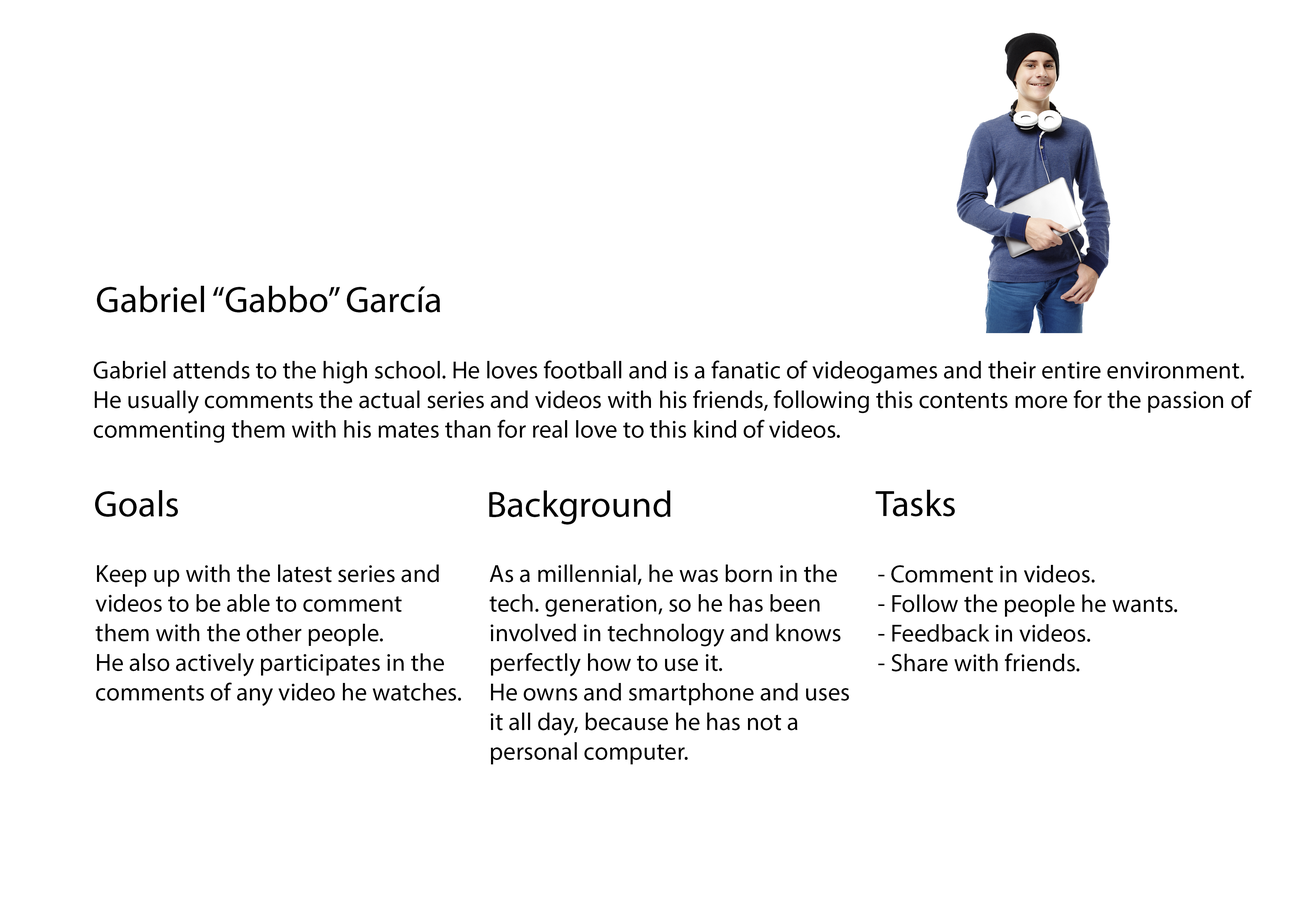
<style>
.page{position:relative;width:1299px;height:918px;background:#ffffff}
.page>*{position:absolute;margin:0}
.t1{font:37px "MyriadPro-Regular";color:#000000}
.t2{font:24.7px "MyriadPro-Regular";color:#000000}
</style>
<div class="page">
<p class="t1" style="left:97px;top:286px;width:343px;height:26px">Gabriel “Gabbo” García</p>
<p class="t2" style="left:94px;top:361px;width:1158px;height:82px">Gabriel attends to the high school. He loves football and is a fanatic of videogames and their entire environment.<br>He usually comments the actual series and videos with his friends, following this contents more for the passion of<br>commenting them with his mates than for real love to this kind of videos.</p>
<p class="t1" style="left:95px;top:490px;width:83px;height:27px">Goals</p>
<p class="t1" style="left:489px;top:491px;width:181px;height:34px">Background</p>
<p class="t1" style="left:875px;top:490px;width:80px;height:26px">Tasks</p>
<p class="t2" style="left:96px;top:565px;width:365px;height:141px">Keep up with the latest series and<br>videos to be able to comment<br>them with the other people.<br>He also actively participates in the<br>comments of any video he watches.</p>
<p class="t2" style="left:489px;top:565px;width:360px;height:200px">As a millennial, he was born in the<br>tech. generation, so he has been<br>involved in technology and knows<br>perfectly how to use it.<br>He owns and smartphone and uses<br>it all day, because he has not a<br>personal computer.</p>
<p class="t2" style="left:878px;top:565px;width:299px;height:107px">- Comment in videos.<br>- Follow the people he wants.<br>- Feedback in videos.<br>- Share with friends.</p>
</div>
